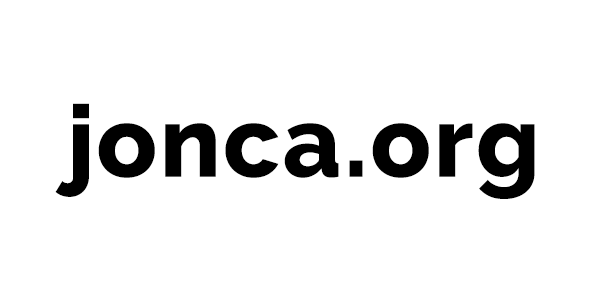
<style>
.page{position:relative;width:600px;height:300px;background:#ffffff}
.page>*{position:absolute;margin:0}
.t1{font:100px "Raleway-ExtraBold";letter-spacing:0.024em;color:#000000}
</style>
<div class="page">
<p class="t1" style="left:55px;top:103px;width:480px;height:96px">jonca.org</p>
</div>
